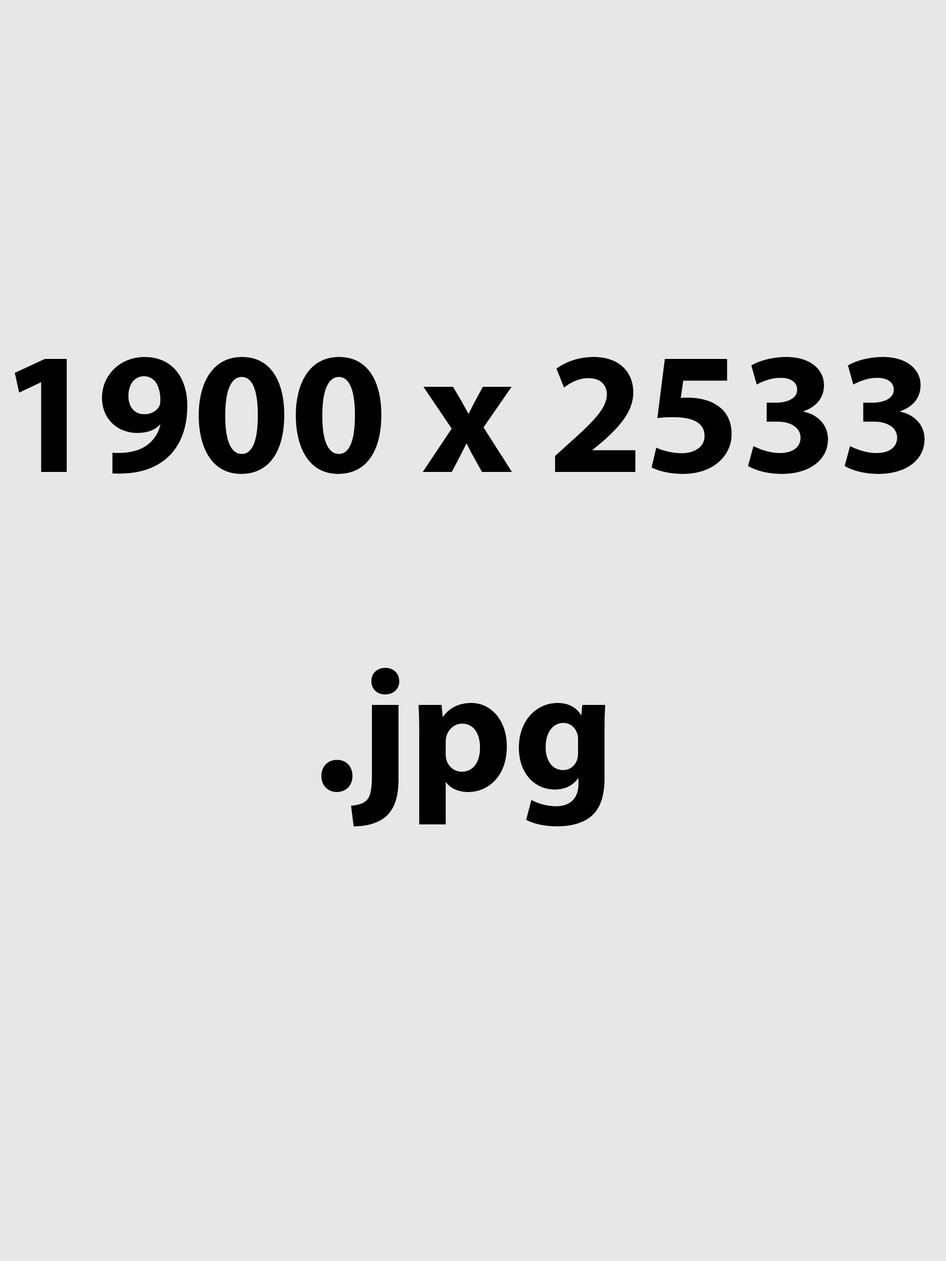
<style>
.page{position:relative;width:946px;height:1261px;background:#e7e7e7}
.page>*{position:absolute;margin:0}
.t1{font:174.2px "MyriadPro-Bold";color:#000000}
</style>
<div class="page">
<p class="t1" style="left:14px;top:356px;width:910px;height:118px">1900 x 2533</p>
<p class="t1" style="left:321px;top:668px;width:284px;height:158px">.jpg</p>
</div>
